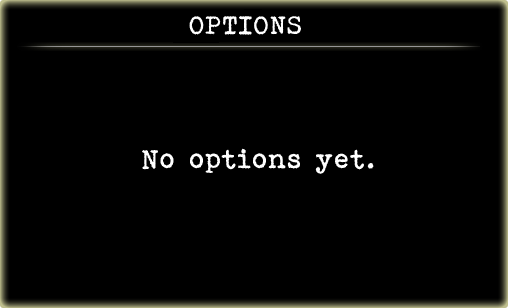
<style>
.page{position:relative;width:508px;height:308px;background:#000000}
.page>*{position:absolute;margin:0}
.t1{font:25.9px "Bohemian-typewriter";color:#ffffff}
.t2{font:27.9px "Bohemian-typewriter";color:#ffffff}
</style>
<div class="page">
<p class="t1" style="left:189px;top:16px;width:112px;height:19px">OPTIONS</p>
<p class="t2" style="left:142px;top:148px;width:232px;height:26px">No options yet.</p>
</div>
